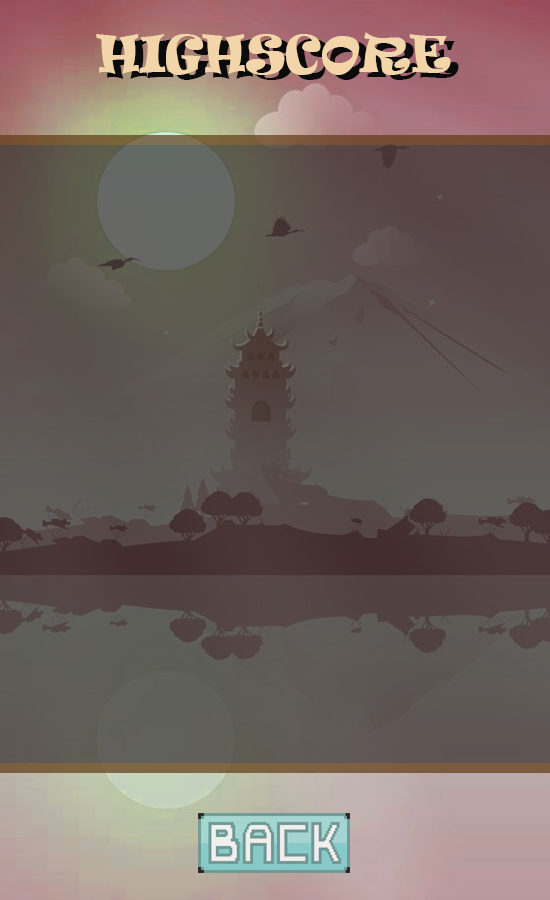
<style>
.page{position:relative;width:550px;height:900px}
.page>*{position:absolute;margin:0}
.t1{font:48px "Ravie";color:#f2d6a9}
.t2{font:48px "Ravie"}
</style>
<div class="page">
<p class="t1" style="left:96px;top:32px;width:355px;height:43px">HIGHSCORE</p>
<p class="t2" style="left:104px;top:37px;width:355px;height:43px">HIGHSCORE</p>
</div>
